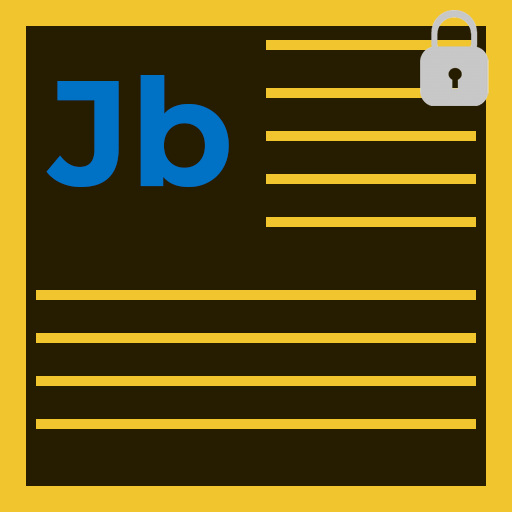
<style>
.page{position:relative;width:512px;height:512px;background:#261c00}
.page>*{position:absolute;margin:0}
.t1{font:150px "Montserrat-Bold";color:#0072c6}
</style>
<div class="page">
<p class="t1" style="left:46px;top:75px;width:183px;height:112px">Jb</p>
</div>
